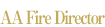
<style>
.page{position:relative;width:105px;height:27px;background:#ffffff}
.page>*{position:absolute;margin:0}
.t1{font:18px "RyuminPro-ExBold";letter-spacing:-0.1em;color:#c4a956;scale:0.85 1}
</style>
<div class="page">
<p class="t1" style="left:0px;top:10px;width:105px;height:15px">AA Fire Director</p>
</div>
